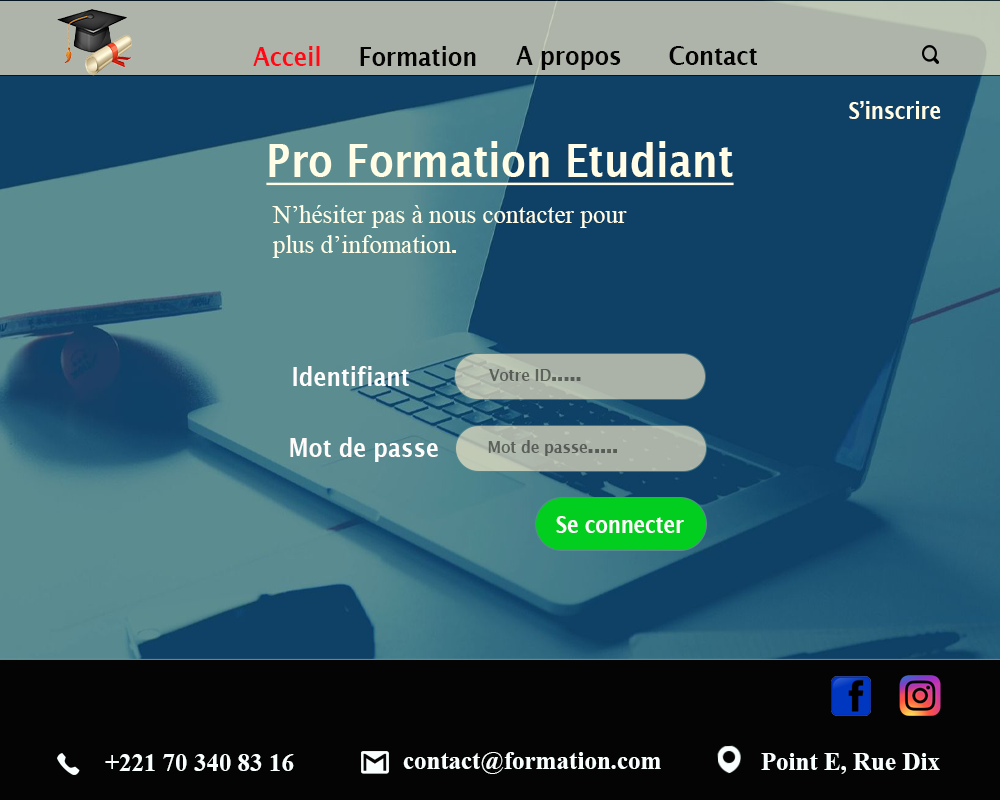
<style>
.page{position:relative;width:1000px;height:800px;background:#0f4166}
.page>*{position:absolute;margin:0}
.t1{font:26.3px "LucidaSans-Demi";color:#fe0915;scale:0.86 1}
.t2{font:26.3px "LucidaSans-Demi";color:#040404;scale:0.86 1}
.t3{font:22.9px "LucidaSans-Demi";color:#fffde5;scale:0.86 1}
.t4{font:45.7px "LucidaSans-Demi";color:#fffde5;text-decoration:underline;scale:0.86 1}
.t5{font:25px "TimesNewRomanPSMT";color:#fffde5}
.t6{font:25px "LucidaSans-Demi";color:#fffde5}
.t7{font:25.7px "LucidaSans-Demi";color:#fdfdfd;scale:0.86 1}
.t8{font:17.1px "LucidaSans-Demi";color:#5c615a;scale:0.86 1}
.t9{font:28.6px "LucidaSans-Demi";color:#5c615a;scale:0.86 1}
.t10{font:25.7px "LucidaSans-Demi";color:#fdfcfb;scale:0.86 1}
.t11{font:17.1px "LucidaSans-Demi";color:#585c56;scale:0.86 1}
.t12{font:28.6px "LucidaSans-Demi";color:#585c56;scale:0.86 1}
.t13{font:22.9px "LucidaSans-Demi";color:#fcfcfb;scale:0.86 1}
.t14{font:25px "TimesNewRomanPS-BoldMT";color:#f9fefe}
</style>
<div class="page">
<p class="t1" style="left:253px;top:46px;width:67px;height:20px">Acceil</p>
<p class="t2" style="left:360px;top:46px;width:116px;height:20px">Formation</p>
<p class="t2" style="left:516px;top:46px;width:105px;height:24px">A propos</p>
<p class="t2" style="left:669px;top:46px;width:88px;height:19px">Contact</p>
<p class="t3" style="left:849px;top:101px;width:92px;height:18px">S’inscrire</p>
<p class="t4" style="left:266px;top:141px;width:468px;height:45px">Pro Formation Etudiant</p>
<p class="t5" style="left:272px;top:205px;width:355px;height:53px">N’hésiter pas à nous contacter pour <br>plus d’infomation<span class="t6">.</span></p>
<p class="t7" style="left:293px;top:366px;width:116px;height:20px">Identifiant</p>
<p class="t8" style="left:489px;top:369px;width:92px;height:12px">Votre ID<span class="t9">.....</span></p>
<p class="t10" style="left:290px;top:437px;width:148px;height:25px">Mot de passe</p>
<p class="t11" style="left:488px;top:440px;width:129px;height:16px">Mot de passe<span class="t12">.....</span></p>
<p class="t13" style="left:556px;top:516px;width:128px;height:17px">Se connecter</p>
<p class="t14" style="left:105px;top:754px;width:189px;height:17px">+221 70 340 83 16</p>
<p class="t14" style="left:403px;top:752px;width:258px;height:22px">contact@formation.com</p>
<p class="t14" style="left:761px;top:753px;width:179px;height:21px">Point E, Rue Dix</p>
</div>
